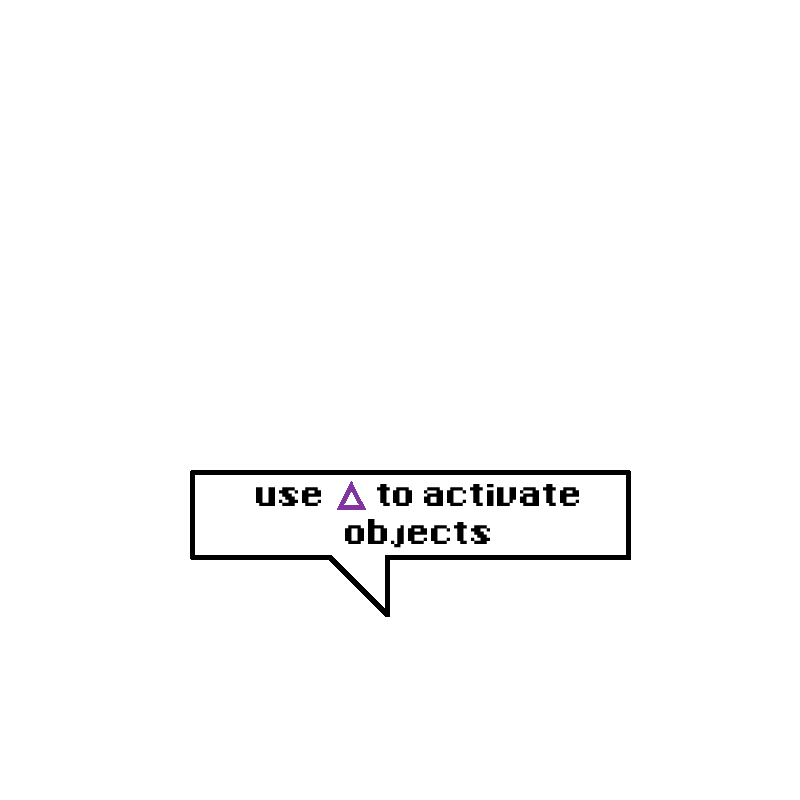
<style>
.page{position:relative;width:800px;height:800px;background:#ffffff}
.page>*{position:absolute;margin:0}
.t1{font:12px/37.5px "8-Bit-Madness";letter-spacing:-0.04em;color:#000000}
</style>
<div class="page">
<p class="t1" style="left:256px;top:484px;width:323px;height:64px;text-align:center">use       to activate<br>objects</p>
</div>
